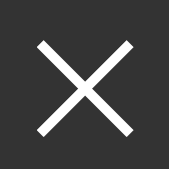
<style>
.page{position:relative;width:169px;height:169px;background:#333333}
.page>*{position:absolute;margin:0}
.t1{font:150px "KozGoPr6N-Regular";color:#ffffff;text-transform:uppercase}
</style>
<div class="page">
<p class="t1" style="left:37px;top:40px;width:97px;height:97px">×</p>
</div>
